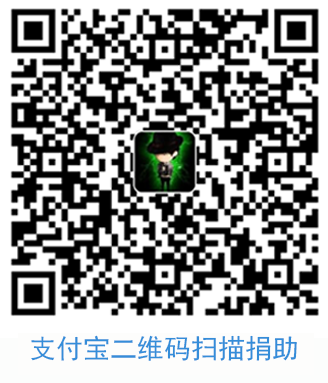
<style>
.page{position:relative;width:328px;height:383px;background:#ffffff}
.page>*{position:absolute;margin:0}
.t1{font:27px "SimHei";color:#348dd9}
</style>
<div class="page">
<p class="t1" style="left:31px;top:335px;width:266px;height:26px">支付宝二维码扫描捐助</p>
</div>
